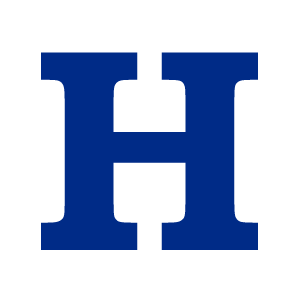
<style>
.page{position:relative;width:300px;height:300px;background:#ffffff}
.page>*{position:absolute;margin:0}
.t1{font:290px "BookmanOldStyle-Bold";color:#002b87}
</style>
<div class="page">
<p class="t1" style="left:41px;top:52px;width:217px;height:198px">H</p>
</div>
